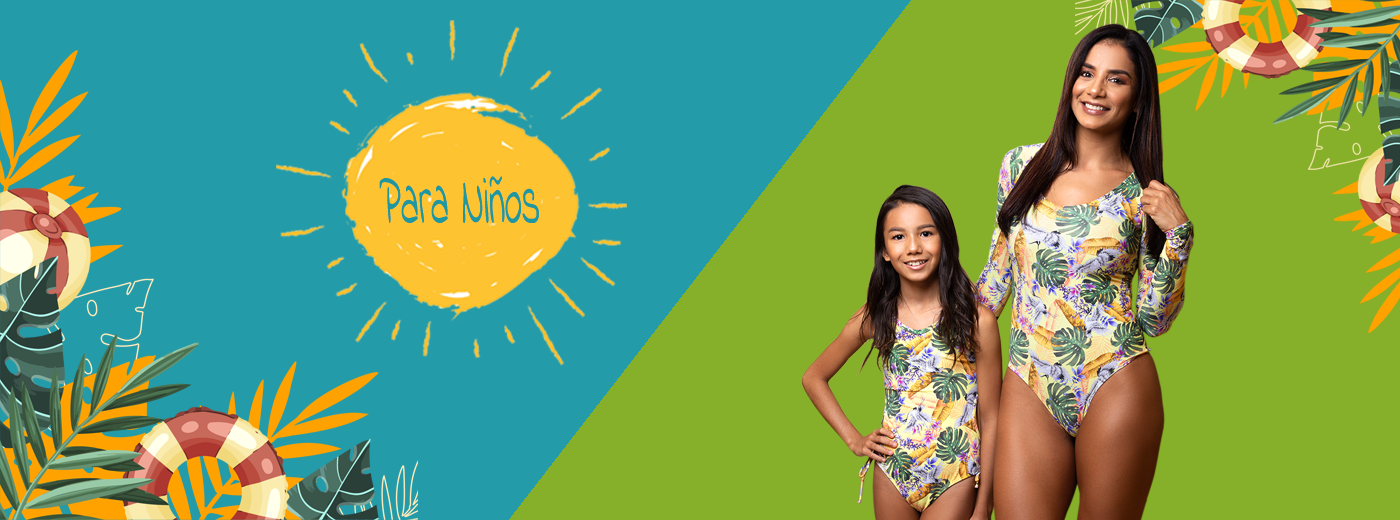
<style>
.page{position:relative;width:1400px;height:520px;background:#249ba8}
.page>*{position:absolute;margin:0}
.t1{font:75px "IndieFlower";color:#1e979f;scale:0.46 1}
</style>
<div class="page">
<p class="t1" style="left:379px;top:176px;width:160px;height:47px">Para Niños</p>
<p class="t1" style="left:379px;top:176px;width:160px;height:47px">Para Niños</p>
</div>
